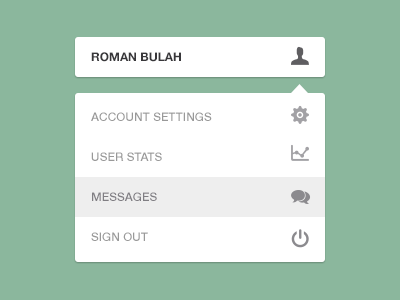
<style>
.page{position:relative;width:400px;height:300px;background:#8bb79d}
.page>*{position:absolute;margin:0}
.t1{font:12px "HelveticaNeue-Bold";color:#38373a;text-transform:uppercase}
.t2{font:12px "HelveticaNeue-Medium";color:#999999;text-transform:uppercase}
.t3{font:12px "HelveticaNeue-Medium";color:#807e83;text-transform:uppercase}
</style>
<div class="page">
<p class="t1" style="left:91px;top:52px;width:90px;height:10px">Roman Bulah</p>
<p class="t2" style="left:91px;top:112px;width:121px;height:9px">Account settings</p>
<p class="t2" style="left:91px;top:152px;width:71px;height:9px">user stats</p>
<p class="t3" style="left:92px;top:192px;width:65px;height:9px">messages</p>
<p class="t2" style="left:91px;top:232px;width:57px;height:9px">sign out</p>
</div>
